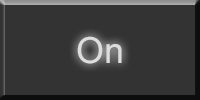
<style>
.page{position:relative;width:200px;height:100px;background:#333333}
.page>*{position:absolute;margin:0}
.t1{font:36px "ArialMT";color:#dddddd}
</style>
<div class="page">
<p class="t1" style="left:77px;top:36px;width:45px;height:28px">On</p>
</div>
